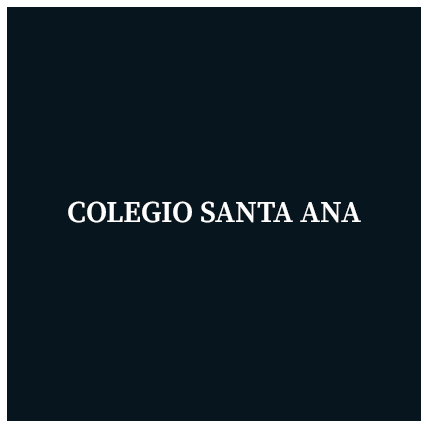
<style>
.page{position:relative;width:428px;height:428px;background:#06151e}
.page>*{position:absolute;margin:0}
.t1{font:30px "SourceSerifRoman-Semibold";color:#ffffff}
</style>
<div class="page">
<p class="t1" style="left:68px;top:201px;width:293px;height:22px">COLEGIO SANTA ANA</p>
</div>
